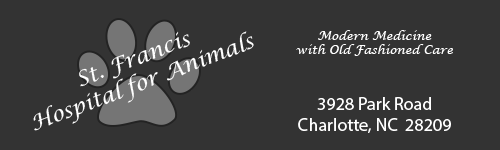
<style>
.page{position:relative;width:500px;height:150px;background:#333333}
.page>*{position:absolute;margin:0}
.t1{font:12px "LucidaCalligraphy-Italic";color:#ffffff}
.t2{font:20.8px/25px "LucidaCalligraphy-Italic";color:#ffffff}
.t3{font:18px "MyriadPro-Regular";color:#ffffff}
</style>
<div class="page">
<p class="t1" style="left:296px;top:30px;width:157px;height:26px;text-align:center">Modern Medicine<br>with Old Fashioned Care</p>
<p class="t2" style="left:33px;top:31px;width:221px;height:100px;text-align:center;rotate:-21deg">St. Francis<br>Hospital for Animals</p>
<p class="t3" style="left:298px;top:97px;width:153px;height:36px;text-align:center">3928 Park Road<br>Charlotte, NC  28209</p>
</div>
